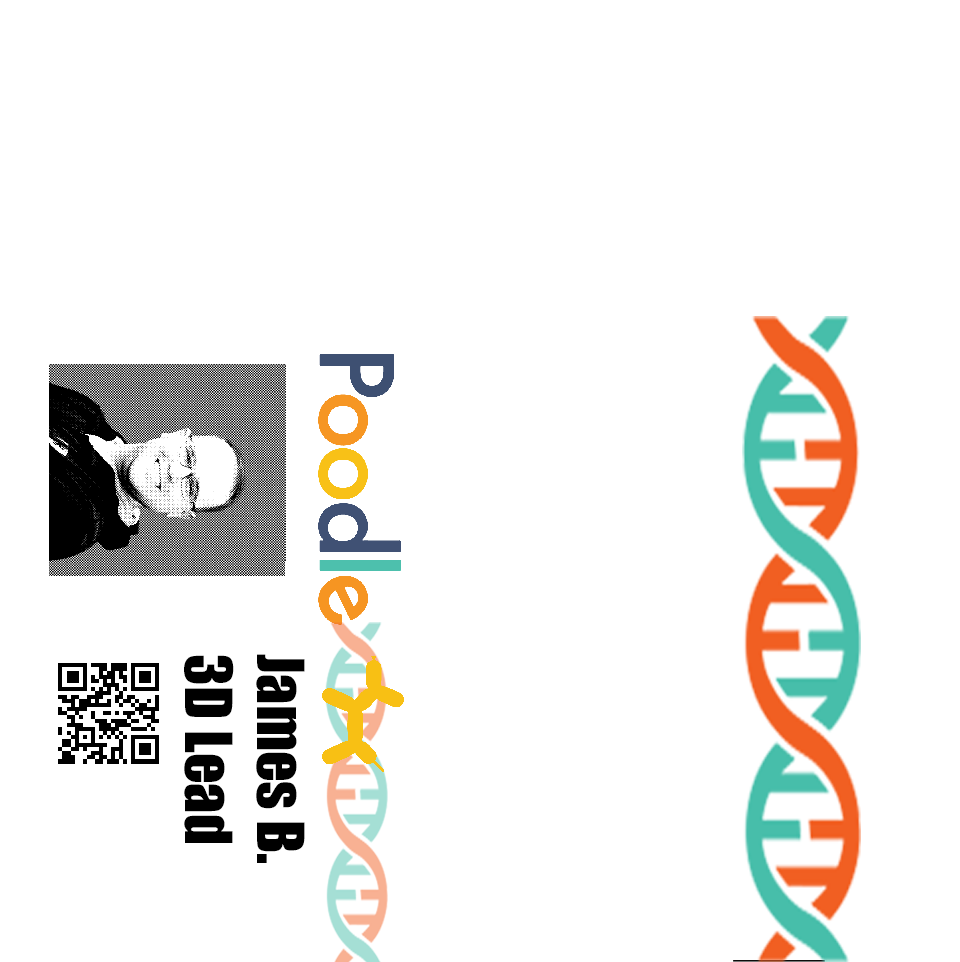
<style>
.page{position:relative;width:960px;height:962px;background:#ffffff}
.page>*{position:absolute;margin:0}
.t1{font:60px "Impact";color:#000000}
</style>
<div class="page">
<p class="t1" style="left:184px;top:654px;width:121px;height:209px;rotate:90deg">James B.<br>3D Lead</p>
</div>
